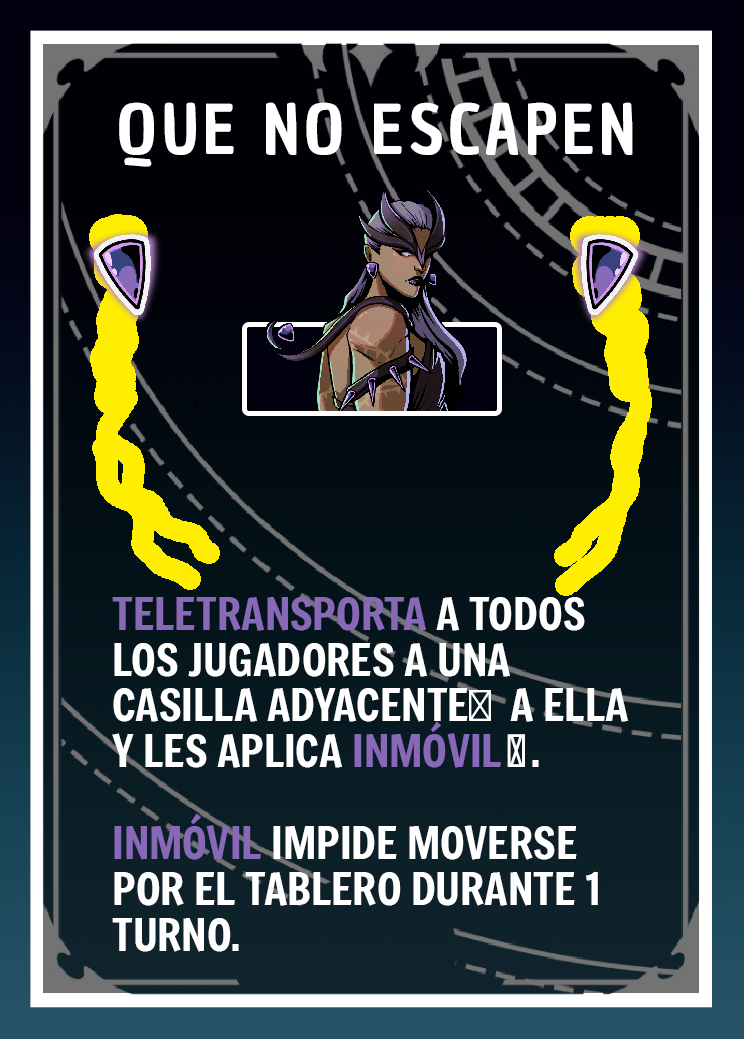
<style>
.page{position:relative;width:744px;height:1039px}
.page>*{position:absolute;margin:0}
.t1{font:66.7px "ChauPhilomeneOne-Regular";letter-spacing:0.075em;color:#ffffff}
.t2{font:43.7px/45.8px "Freeman-Regular";color:#ffffff}
.t3{font:43.7px/45.8px "Freeman-Regular";color:#8869b7}
.t4{font:43.7px/45.8px "MyriadPro-Regular";color:#ffffff}
</style>
<div class="page">
<p class="t1" style="left:119px;top:102px;width:514px;height:65px">QUE NO ESCAPEN</p>
<p class="t2" style="left:112px;top:597px;width:516px;height:355px"><span class="t3">TELETRANSPORTA </span>A TODOS LOS JUGADORES A UNA CASILLA ADYACENTE<span class="t4">⬆️</span>  A ELLA Y LES APLICA <span class="t3">INMÓVIL</span>🌀. <br><span class="t3"><br>INMÓVIL </span>IMPIDE MOVERSE POR EL TABLERO DURANTE 1 TURNO.</p>
</div>
